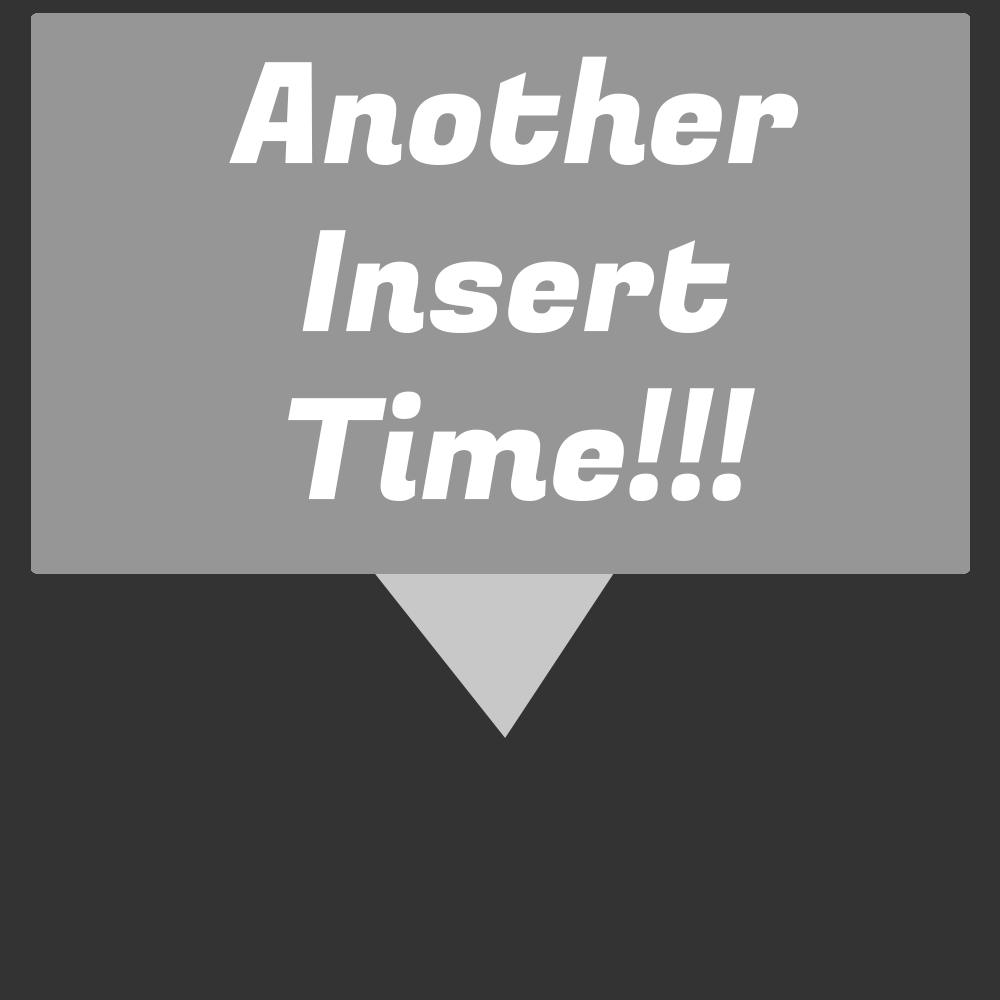
<style>
.page{position:relative;width:1000px;height:1000px;background:#969696}
.page>*{position:absolute;margin:0}
.t1{font:140px "FugazOne-Regular";color:#ffffff}
</style>
<div class="page">
<p class="t1" style="left:229px;top:56px;width:569px;height:445px;text-align:center">Another Insert Time!!!</p>
</div>
